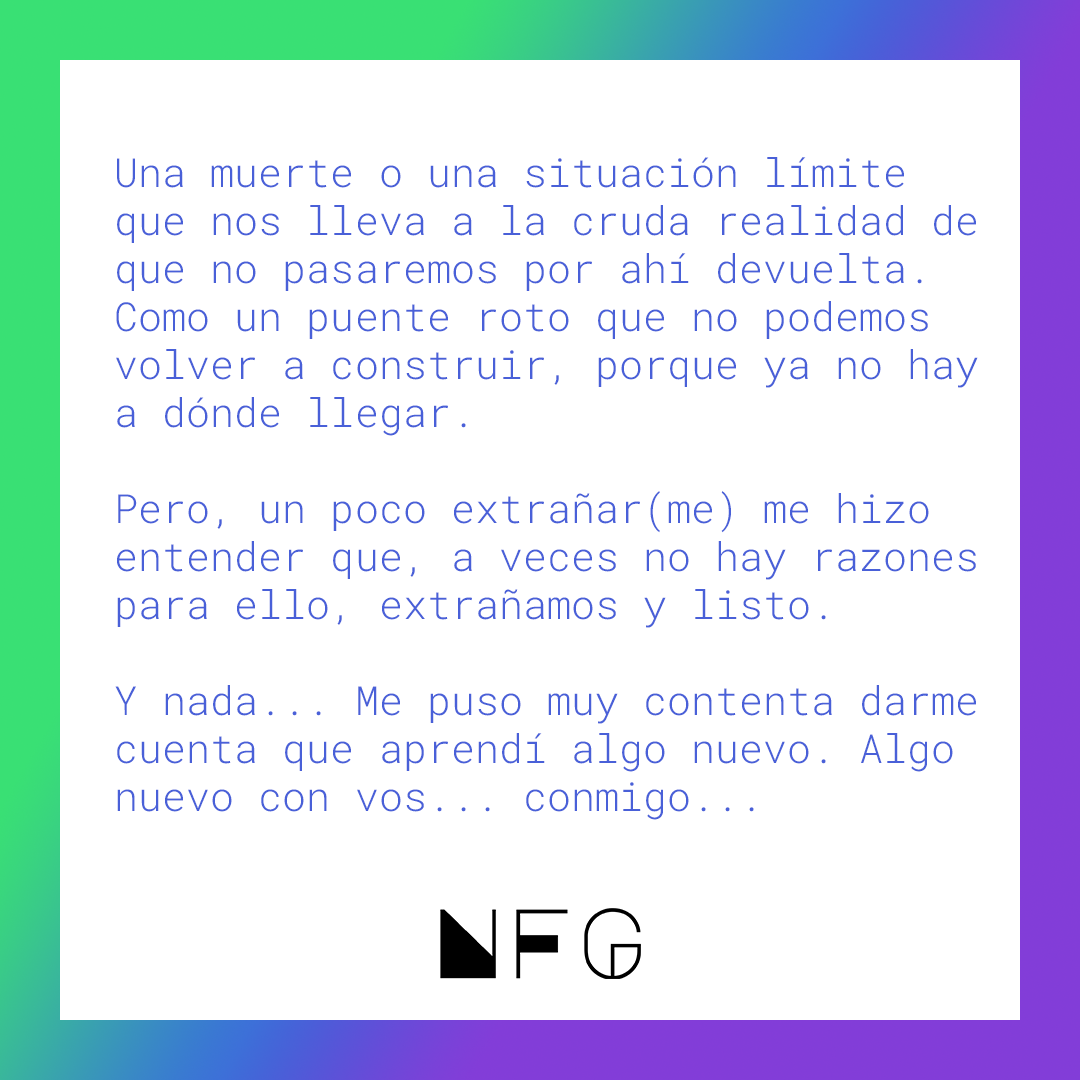
<style>
.page{position:relative;width:1080px;height:1080px;background:#ffffff}
.page>*{position:absolute;margin:0}
.t1{font:40px "RobotoMono-Light";color:#4960d8}
</style>
<div class="page">
<p class="t1" style="left:115px;top:157px;width:863px;height:663px">Una muerte o una situación límite que nos lleva a la cruda realidad de que no pasaremos por ahí devuelta. Como un puente roto que no podemos volver a construir, porque ya no hay a dónde llegar.<br><br>Pero, un poco extrañar(me) me hizo entender que, a veces no hay razones para ello, extrañamos y listo.<br><br>Y nada... Me puso muy contenta darme cuenta que aprendí algo nuevo. Algo nuevo con vos... conmigo...</p>
</div>
